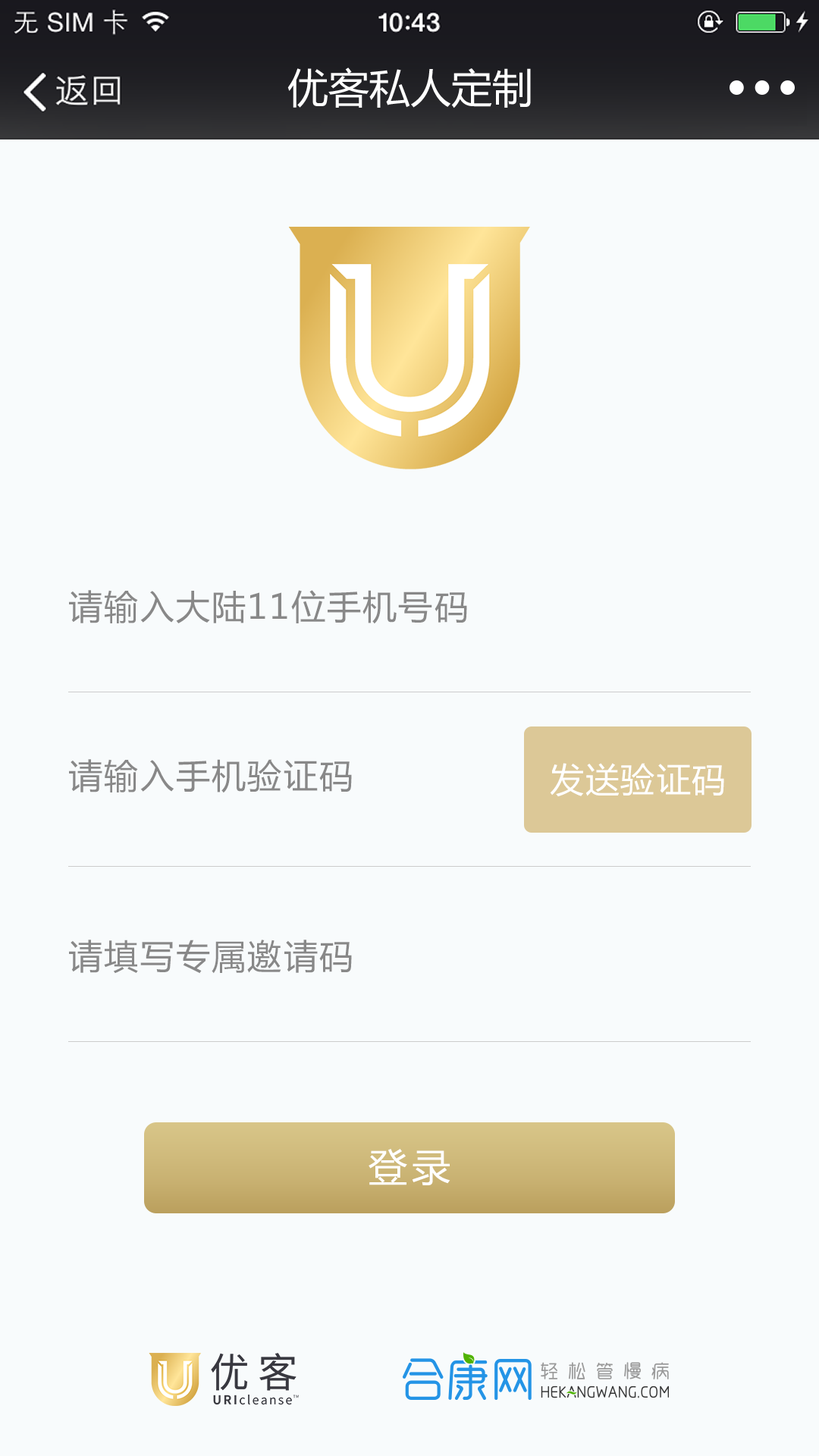
<style>
.page{position:relative;width:819px;height:1456px;background:#f8fbfc}
.page>*{position:absolute;margin:0}
.t1{font:34.1px "MicrosoftYaHei";letter-spacing:0.05em;color:#888888}
.t2{font:34.1px "MicrosoftYaHei";letter-spacing:0.025em;color:#ffffff}
.t3{font:38.7px "MicrosoftYaHei";letter-spacing:0.1em;color:#ffffff}
</style>
<div class="page">
<p class="t1" style="left:69px;top:590px;width:398px;height:34px">请输入大陆11位手机号码</p>
<p class="t1" style="left:69px;top:759px;width:283px;height:34px">请输入手机验证码</p>
<p class="t2" style="left:550px;top:763px;width:174px;height:34px">发送验证码</p>
<p class="t1" style="left:69px;top:940px;width:283px;height:34px">请填写专属邀请码</p>
<p class="t3" style="left:369px;top:1149px;width:81px;height:36px">登录</p>
</div>
